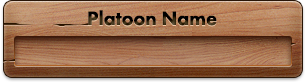
<style>
.page{position:relative;width:306px;height:83px}
.page>*{position:absolute;margin:0}
.t1{font:20px "FuturaPT-Heavy"}
</style>
<div class="page">
<p class="t1" style="left:88px;top:10px;width:129px;height:16px">Platoon Name</p>
</div>
